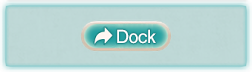
<style>
.page{position:relative;width:252px;height:72px}
.page>*{position:absolute;margin:0}
.t1{font:18px "FutoGoB101Pr5-Bold";letter-spacing:-0.04em;color:#ffffff}
</style>
<div class="page">
<p class="t1" style="left:117px;top:29px;width:39px;height:15px">Dock</p>
</div>
